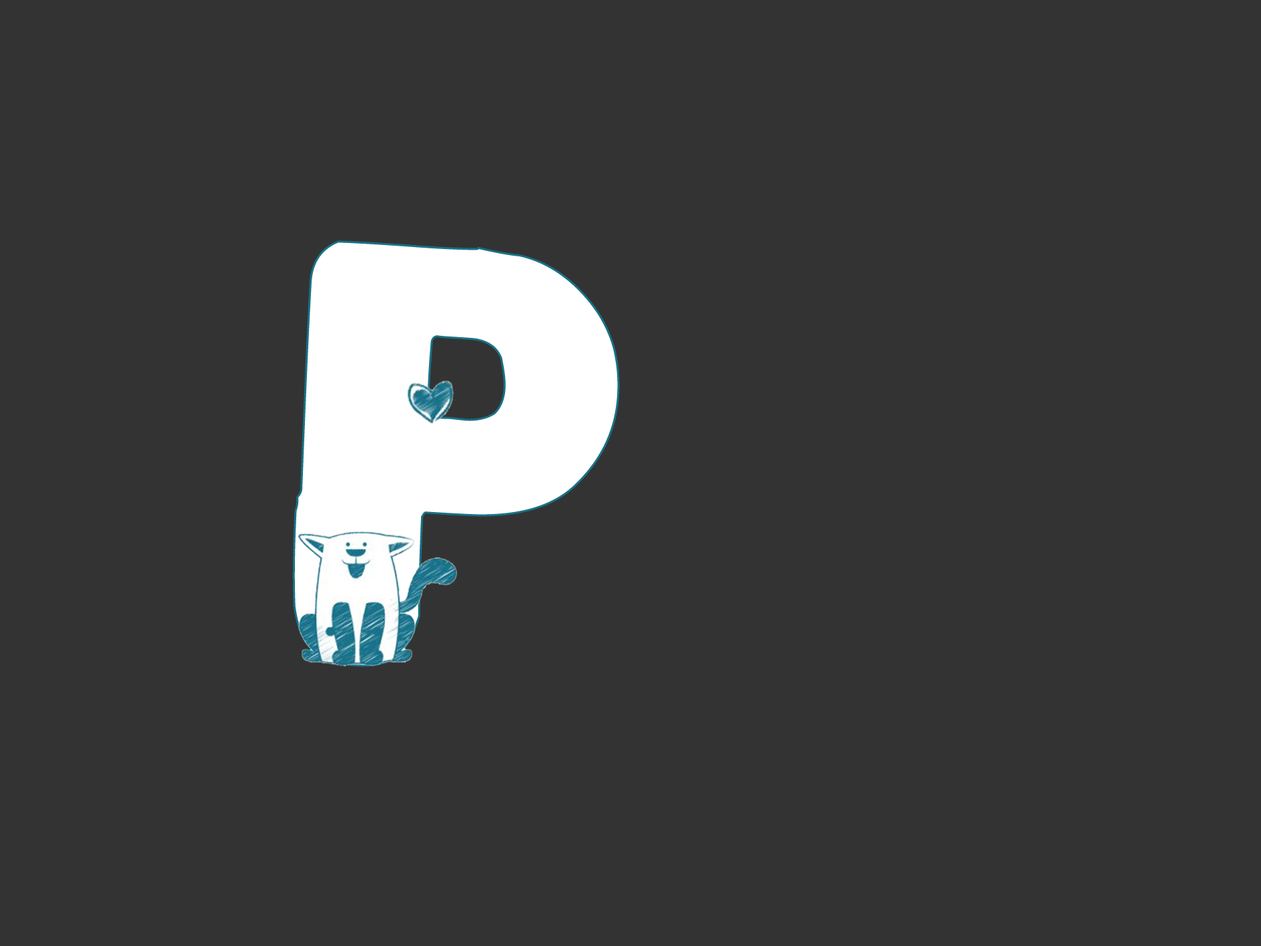
<style>
.page{position:relative;width:1261px;height:946px;background:#333333}
.page>*{position:absolute;margin:0}
.t1{font:572.7px "AlphaFridgeMagnets";letter-spacing:0.12em;color:#ffffff}
</style>
<div class="page">
<p class="t1" style="left:292px;top:240px;width:328px;height:427px">P</p>
</div>
